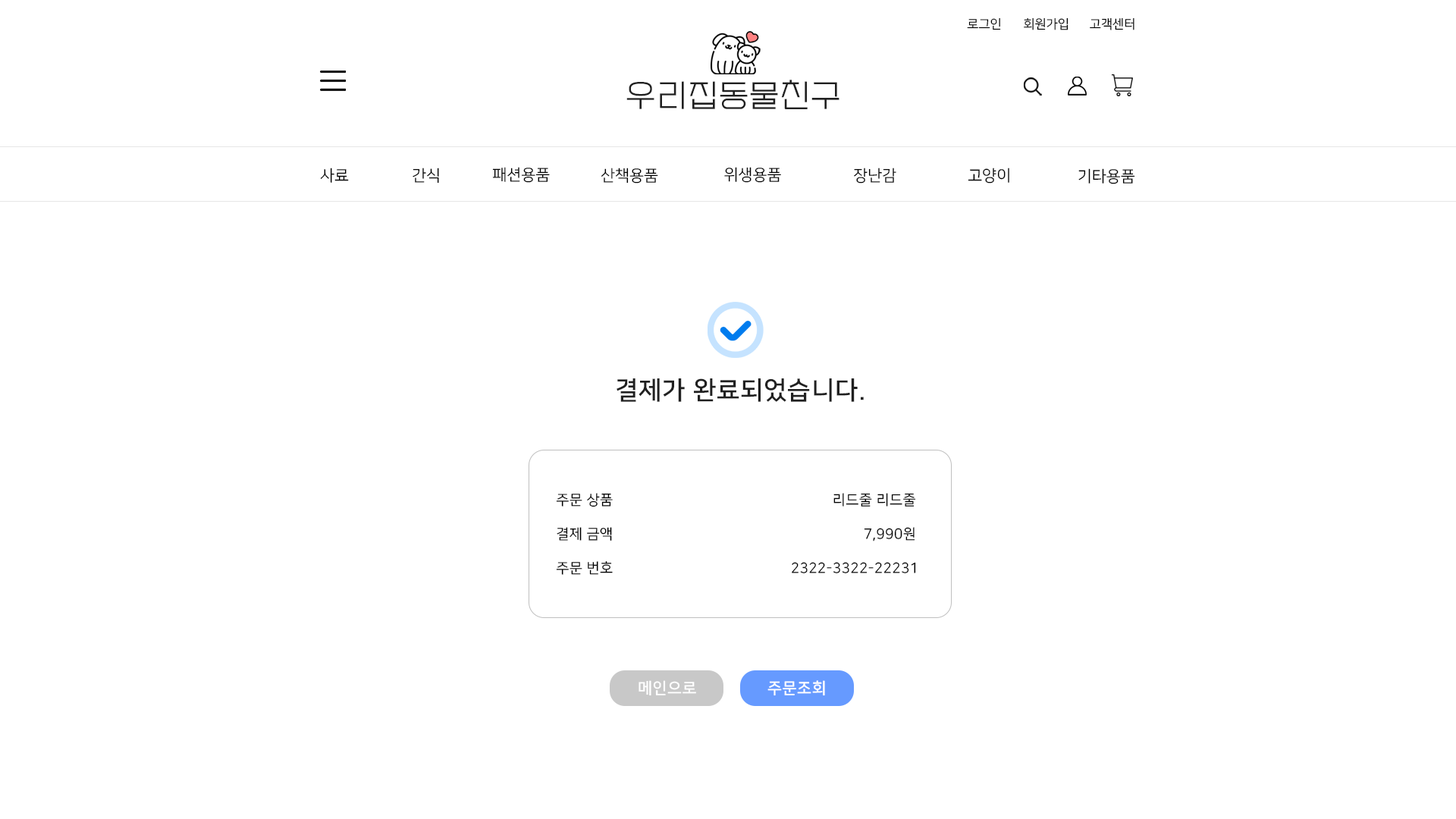
<style>
.page{position:relative;width:1456px;height:819px;background:#ffffff}
.page>*{position:absolute;margin:0}
.t1{font:12.6px "NanumSquareR";color:#000000}
.t2{font:31.6px "EF_watermelonSalad";letter-spacing:0.025em;color:#202020}
.t3{font:15.8px "NanumSquareR";color:#000000}
.t4{font:25.3px "NanumSquareB";letter-spacing:0.025em;color:#202020}
.t5{font:14.2px "NanumSquareR";letter-spacing:0.025em;color:#000000}
.t6{font:15.8px "NanumSquareB";letter-spacing:0.025em;color:#ffffff}
</style>
<div class="page">
<p class="t1" style="left:967px;top:17px;width:34px;height:13px">로그인</p>
<p class="t1" style="left:1024px;top:17px;width:44px;height:13px">회원가입</p>
<p class="t1" style="left:1090px;top:17px;width:44px;height:13px">고객센터</p>
<p class="t2" style="left:626px;top:80px;width:213px;height:29px">우리집동물친구</p>
<p class="t3" style="left:320px;top:168px;width:29px;height:15px">사료</p>
<p class="t3" style="left:413px;top:168px;width:26px;height:16px">간식</p>
<p class="t3" style="left:492px;top:167px;width:58px;height:16px">패션용품</p>
<p class="t3" style="left:601px;top:168px;width:57px;height:16px">산책용품</p>
<p class="t3" style="left:724px;top:167px;width:57px;height:16px">위생용품</p>
<p class="t3" style="left:854px;top:168px;width:42px;height:16px">장난감</p>
<p class="t3" style="left:968px;top:168px;width:41px;height:16px">고양이</p>
<p class="t3" style="left:1078px;top:168px;width:57px;height:16px">기타용품</p>
<p class="t4" style="left:617px;top:378px;width:247px;height:24px">결제가 완료되었습니다.</p>
<p class="t5" style="left:556px;top:493px;width:57px;height:82px;text-align:center">주문 상품<br><br>결제 금액<br><br>주문 번호</p>
<p class="t5" style="left:792px;top:493px;width:124px;height:80px;text-align:center">리드줄 리드줄<br><br>        7,990원<br><br>2322-3322-22231</p>
<p class="t6" style="left:639px;top:680px;width:57px;height:16px">메인으로</p>
<p class="t6" style="left:767px;top:680px;width:58px;height:16px">주문조회</p>
</div>
